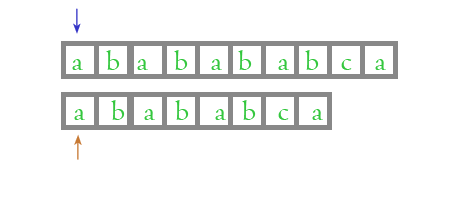
<style>
.page{position:relative;width:454px;height:200px;background:#ffffff}
.page>*{position:absolute;margin:0}
.t1{font:30px "SimSun";color:#3434c7}
.t2{font:30px "Centaur";color:#34c73e}
.t3{font:30px "SimSun";color:#c77934}
</style>
<div class="page">
<p class="t1" style="left:73px;top:8px;width:8px;height:26px">↓</p>
<p class="t2" style="left:106px;top:50px;width:14px;height:20px">b</p>
<p class="t2" style="left:174px;top:50px;width:14px;height:20px">b</p>
<p class="t2" style="left:238px;top:50px;width:14px;height:20px">b</p>
<p class="t2" style="left:305px;top:50px;width:14px;height:20px">b</p>
<p class="t2" style="left:72px;top:59px;width:11px;height:11px">a</p>
<p class="t2" style="left:137px;top:59px;width:11px;height:11px">a</p>
<p class="t2" style="left:211px;top:59px;width:11px;height:11px">a</p>
<p class="t2" style="left:278px;top:59px;width:11px;height:11px">a</p>
<p class="t2" style="left:341px;top:59px;width:11px;height:11px">c</p>
<p class="t2" style="left:375px;top:59px;width:11px;height:11px">a</p>
<p class="t2" style="left:111px;top:100px;width:14px;height:20px">b</p>
<p class="t2" style="left:175px;top:100px;width:14px;height:20px">b</p>
<p class="t2" style="left:242px;top:100px;width:14px;height:20px">b</p>
<p class="t2" style="left:74px;top:109px;width:11px;height:11px">a</p>
<p class="t2" style="left:144px;top:109px;width:11px;height:11px">a</p>
<p class="t2" style="left:215px;top:109px;width:11px;height:11px">a</p>
<p class="t2" style="left:278px;top:109px;width:11px;height:11px">c</p>
<p class="t2" style="left:312px;top:109px;width:11px;height:11px">a</p>
<p class="t3" style="left:74px;top:134px;width:8px;height:26px">↑</p>
</div>
